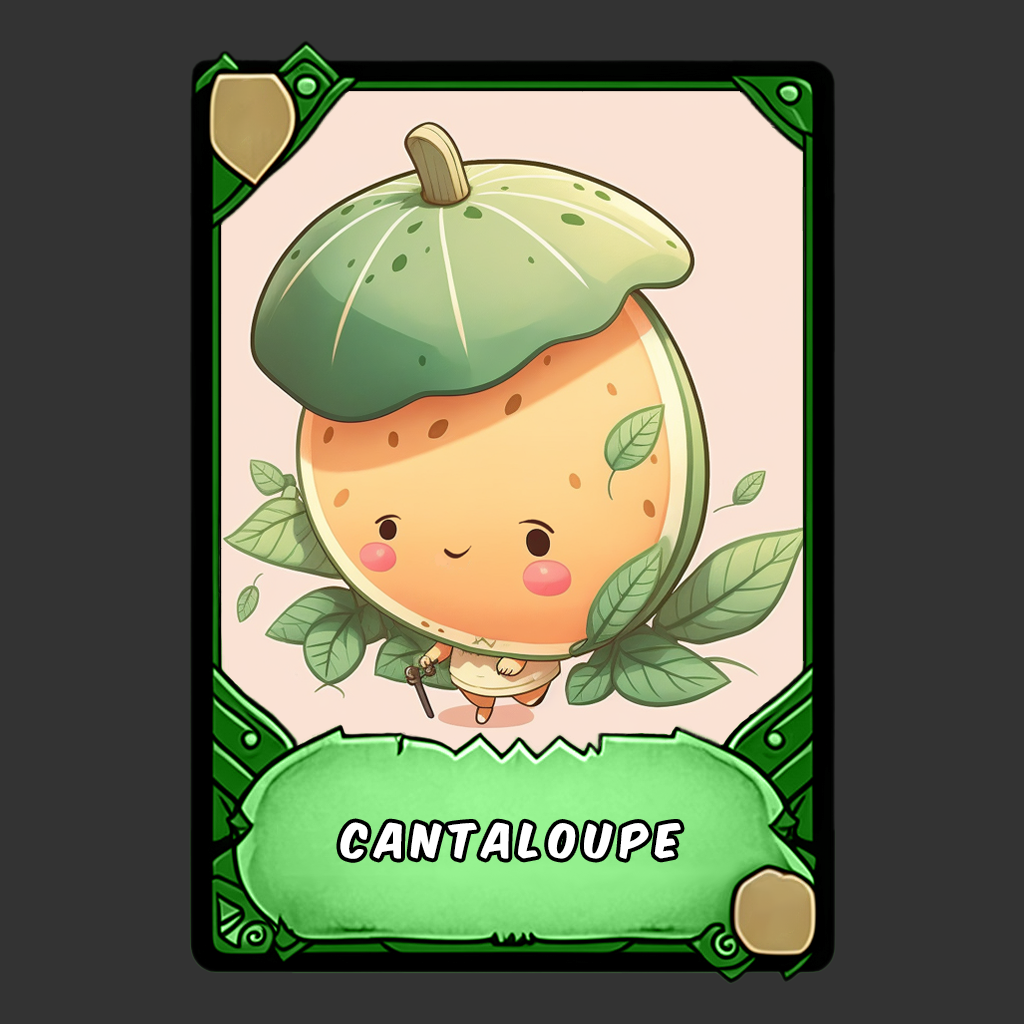
<style>
.page{position:relative;width:1024px;height:1024px;background:#333333}
.page>*{position:absolute;margin:0}
.t1{font:40px "KomikaAxis";letter-spacing:0.2em;color:#ffffff}
</style>
<div class="page">
<p class="t1" style="left:340px;top:822px;width:341px;height:37px">cantaloupe</p>
</div>
